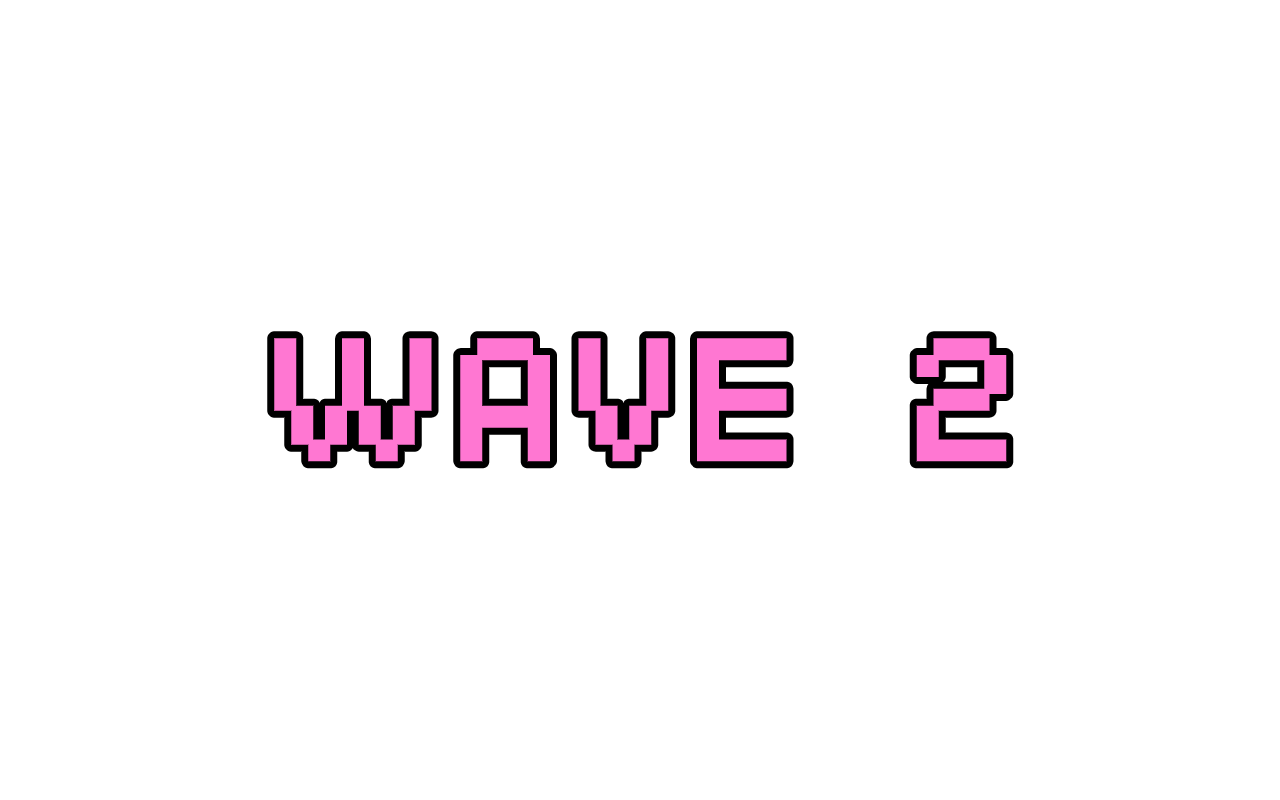
<style>
.page{position:relative;width:1280px;height:800px;background:#ffffff}
.page>*{position:absolute;margin:0}
.t1{font:169px "SFPixelate-Bold";color:#ff77d2}
</style>
<div class="page">
<p class="t1" style="left:274px;top:338px;width:733px;height:124px">WAVE 2</p>
</div>
